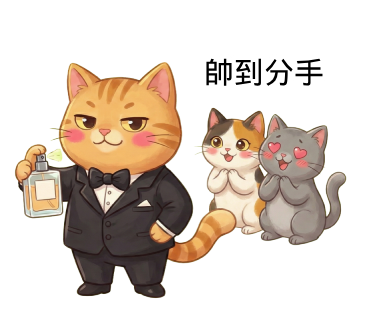
<style>
.page{position:relative;width:370px;height:320px;background:#ffffff}
.page>*{position:absolute;margin:0}
.t1{font:30px "DroidSansFallback";color:#000000}
</style>
<div class="page">
<p class="t1" style="left:206px;top:58px;width:117px;height:28px">帥到分手</p>
</div>
